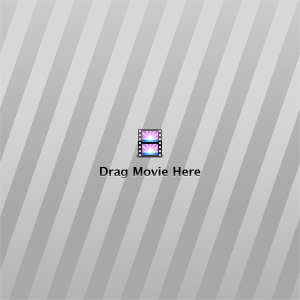
<style>
.page{position:relative;width:300px;height:300px}
.page>*{position:absolute;margin:0}
.t1{font:12px "LucidaGrande-Bold"}
</style>
<div class="page">
<p class="t1" style="left:100px;top:167px;width:101px;height:12px">Drag Movie Here</p>
</div>
